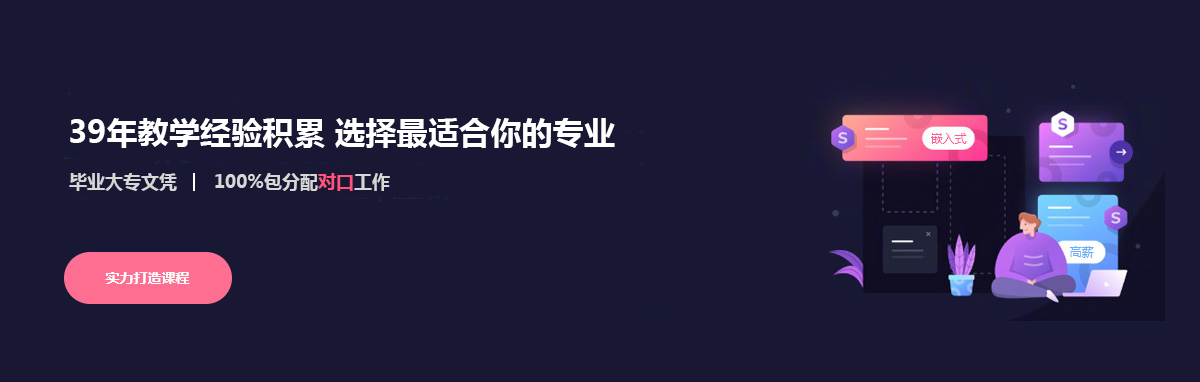
<style>
.page{position:relative;width:1200px;height:382px;background:#181834}
.page>*{position:absolute;margin:0}
.t1{font:31.2px "MicrosoftYaHei-Bold";color:#ffffff}
.t2{font:18px "MicrosoftYaHei-Bold";color:#d7d7d7}
.t3{font:18px "MicrosoftYaHei-Bold";color:#ff537d}
</style>
<div class="page">
<p class="t1" style="left:70px;top:118px;width:545px;height:30px">39年教学经验积累 选择最适合你的专业</p>
<p class="t2" style="left:69px;top:173px;width:108px;height:18px">毕业大专文凭</p>
<p class="t2" style="left:215px;top:173px;width:175px;height:18px">100%包分配<span class="t3">对口</span>工作</p>
</div>
